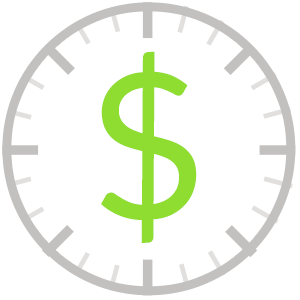
<style>
.page{position:relative;width:300px;height:300px;background:#ffffff}
.page>*{position:absolute;margin:0}
.t1{font:202.5px "Lato-Regular";color:#90dd31}
</style>
<div class="page">
<p class="t1" style="left:101px;top:51px;width:96px;height:192px;rotate:-4deg">$</p>
</div>
